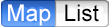
<style>
.page{position:relative;width:110px;height:27px}
.page>*{position:absolute;margin:0}
.t1{font:23px "ArialMT";color:#ffffff}
.t2{font:23px "ArialMT";color:#000000}
</style>
<div class="page">
<p class="t1" style="left:8px;top:4px;width:43px;height:22px">Map</p>
<p class="t2" style="left:65px;top:4px;width:34px;height:18px">List</p>
</div>
